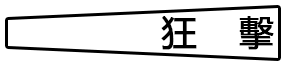
<style>
.page{position:relative;width:286px;height:66px;background:#ffffff}
.page>*{position:absolute;margin:0}
.t1{font:35px "MicrosoftYaHei";letter-spacing:0.06em;color:#000000;font-weight:bold}
</style>
<div class="page">
<p class="t1" style="left:161px;top:16px;width:113px;height:34px">狂　擊</p>
</div>
